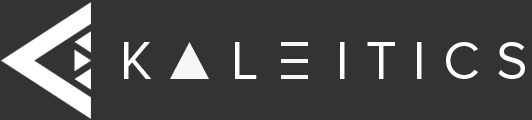
<style>
.page{position:relative;width:532px;height:120px;background:#333333}
.page>*{position:absolute;margin:0}
.t1{font:54px "ProximaNova-Regular";letter-spacing:0.31em;color:#ffffff;text-transform:uppercase}
</style>
<div class="page">
<p class="t1" style="left:124px;top:42px;width:401px;height:37px">k  l  itics</p>
</div>
